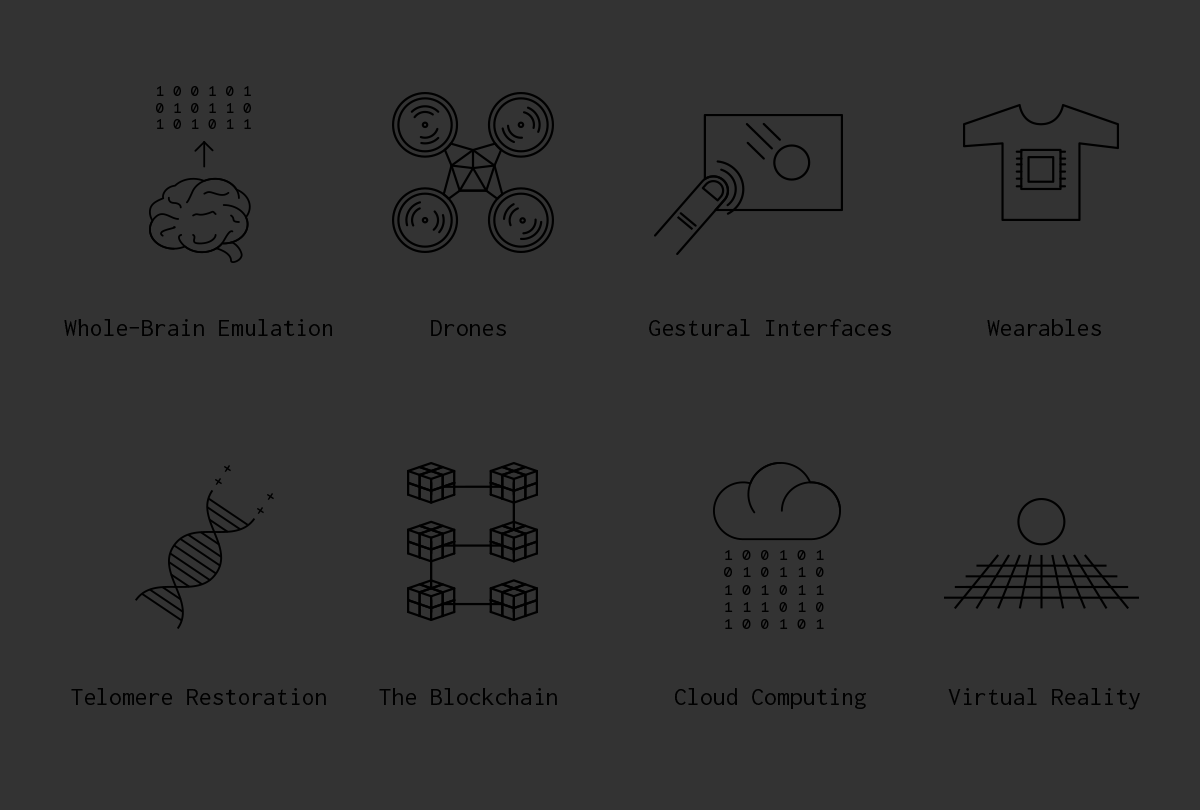
<style>
.page{position:relative;width:1200px;height:810px;background:#333333}
.page>*{position:absolute;margin:0}
.t1{font:25.7px "InconsolataForPowerline";color:#000000}
</style>
<div class="page">
<p class="t1" style="left:64px;top:319px;width:268px;height:17px">Whole-Brain Emulation</p>
<p class="t1" style="left:431px;top:320px;width:75px;height:16px">Drones</p>
<p class="t1" style="left:649px;top:319px;width:242px;height:17px">Gestural Interfaces</p>
<p class="t1" style="left:987px;top:319px;width:114px;height:17px">Wearables</p>
<p class="t1" style="left:71px;top:688px;width:255px;height:17px">Telomere Restoration</p>
<p class="t1" style="left:379px;top:688px;width:178px;height:17px">The Blockchain</p>
<p class="t1" style="left:675px;top:688px;width:191px;height:21px">Cloud Computing</p>
<p class="t1" style="left:948px;top:688px;width:192px;height:22px">Virtual Reality</p>
</div>
